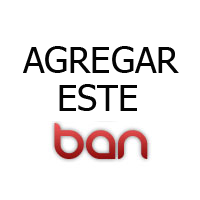
<style>
.page{position:relative;width:200px;height:200px;background:#ffffff}
.page>*{position:absolute;margin:0}
.t1{font:36px "Tahoma";color:#040404}
</style>
<div class="page">
<p class="t1" style="left:23px;top:46px;width:156px;height:27px">AGREGAR</p>
<p class="t1" style="left:59px;top:84px;width:78px;height:27px">ESTE</p>
</div>
